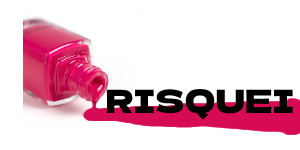
<style>
.page{position:relative;width:300px;height:150px;background:#ffffff}
.page>*{position:absolute;margin:0}
.t1{font:32px "DelaGothicOne-Regular";color:#000000}
</style>
<div class="page">
<p class="t1" style="left:106px;top:89px;width:187px;height:31px">RISQUEI</p>
</div>
